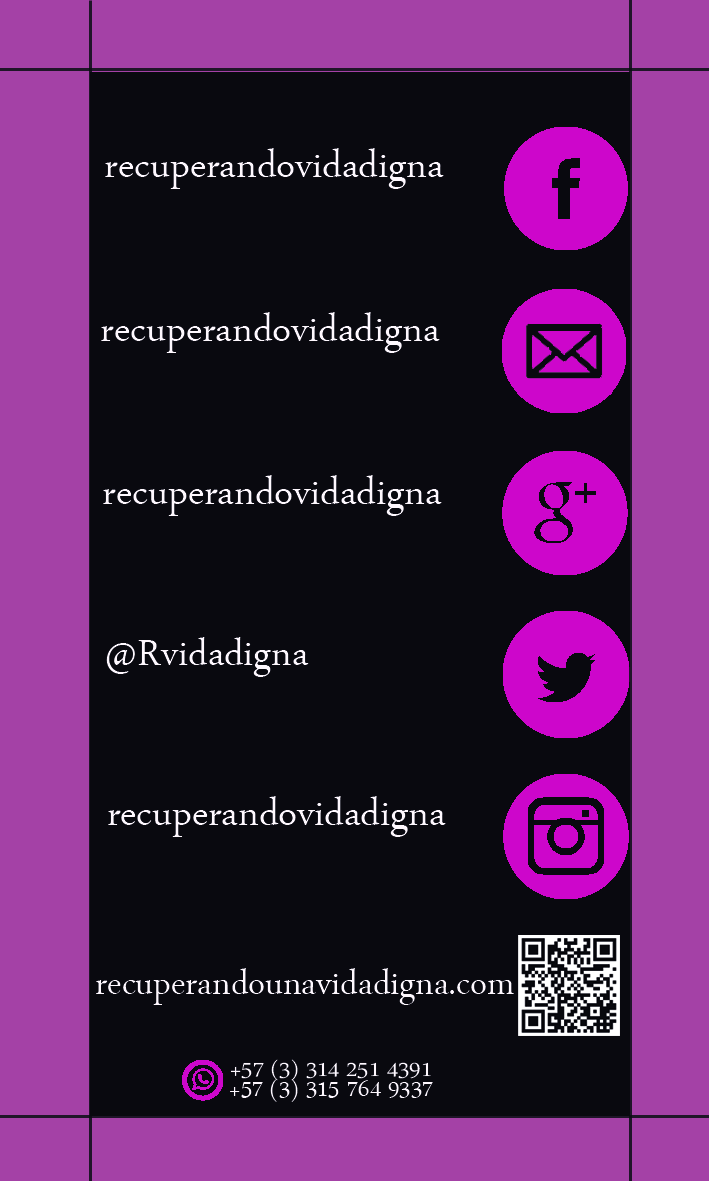
<style>
.page{position:relative;width:709px;height:1181px;background:#09090f}
.page>*{position:absolute;margin:0}
.t1{font:54.6px "ArabicTypesetting";color:#fef8fe}
.t2{font:54.2px "ArabicTypesetting";color:#fef8fe}
.t3{font:62.9px "ArabicTypesetting";color:#08090e}
.t4{font:48.7px "ArabicTypesetting";color:#fef8fe}
.t5{font:32.1px "ArabicTypesetting";color:#fef8fe;scale:1.06 1}
.t6{font:34.4px "ArabicTypesetting";color:#fef8fe}
</style>
<div class="page">
<p class="t1" style="left:105px;top:148px;width:339px;height:41px">recuperandovidadigna</p>
<p class="t1" style="left:101px;top:312px;width:339px;height:41px">recuperandovidadigna</p>
<p class="t1" style="left:103px;top:475px;width:339px;height:41px">recuperandovidadigna</p>
<p class="t2" style="left:106px;top:637px;width:203px;height:40px">@Rvidadigna</p>
<p class="t1" style="left:108px;top:796px;width:338px;height:41px"><span class="t3"> </span>recuperandovidadigna</p>
<p class="t4" style="left:96px;top:968px;width:418px;height:37px">recuperandounavidadigna.com</p>
<p class="t5" style="left:230px;top:1059px;width:201px;height:22px">+57 (3) 314 251 4391</p>
<p class="t6" style="left:230px;top:1079px;width:203px;height:23px">+57 (3) 315 764 9337</p>
</div>
